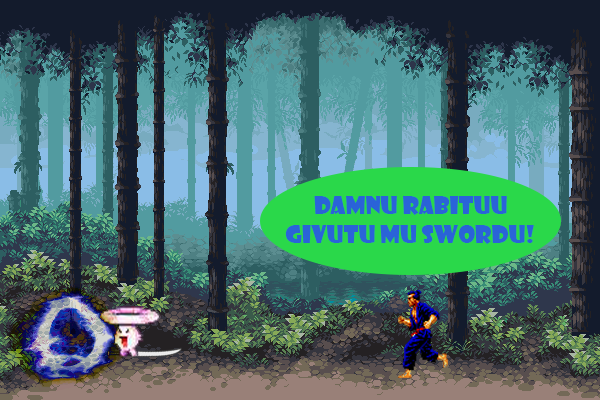
<style>
.page{position:relative;width:600px;height:400px}
.page>*{position:absolute;margin:0}
.t1{font:24px "ShowcardGothic-Reg";color:#2a63d8}
</style>
<div class="page">
<p class="t1" style="left:285px;top:196px;width:249px;height:48px;text-align:center">dAMNu rABITUU<br>GIVUTU MU SWORDU!</p>
</div>
